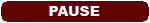
<style>
.page{position:relative;width:150px;height:23px;background:#5f0505}
.page>*{position:absolute;margin:0}
.t1{font:14px "Arial-Black";color:#ffffff}
</style>
<div class="page">
<p class="t1" style="left:49px;top:6px;width:51px;height:10px">PAUSE</p>
</div>
